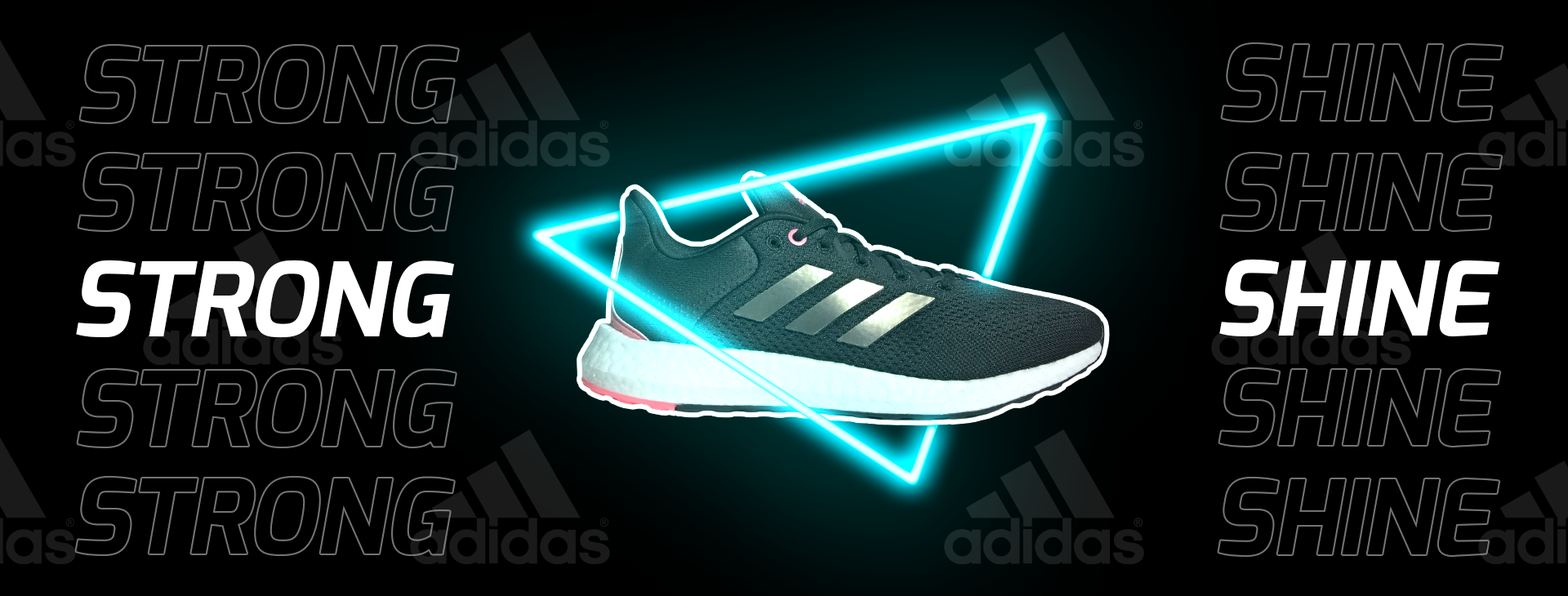
<style>
.page{position:relative;width:1568px;height:596px;background:#000000}
.page>*{position:absolute;margin:0}
.t1{font:102.1px "Exo-Bold";color:#ffffff;font-style:italic}
</style>
<div class="page">
<p class="t1" style="left:76px;top:260px;width:378px;height:78px">STRONG</p>
<p class="t1" style="left:1219px;top:259px;width:281px;height:77px">SHINE</p>
</div>
